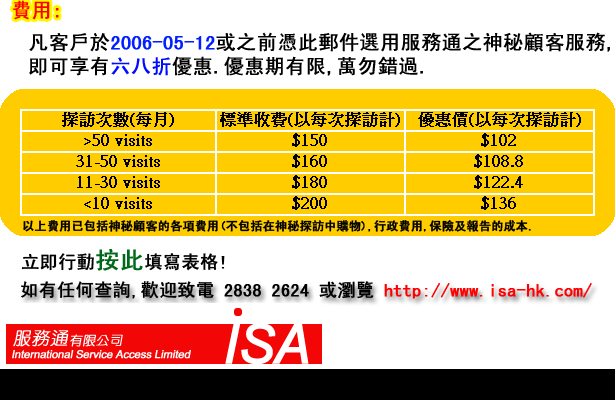
<style>
.page{position:relative;width:615px;height:400px;background:#ffffff}
.page>*{position:absolute;margin:0}
.t1{font:20px "SimHei";color:#ff0000;font-weight:bold}
.t2{font:20px "SimHei";color:#000000;font-weight:bold}
.t3{font:20px "SimHei";color:#001eff;font-weight:bold}
.t4{font:20px "SimHei";color:#000cff;font-weight:bold}
.t5{font:12px "SimHei";color:#000000;font-weight:bold}
.t6{font:18px "SimHei";color:#000000;font-weight:bold}
.t7{font:24px "SimHei";color:#006919;font-weight:bold}
.t8{font:18px "SimHei";color:#ff0000;font-weight:bold}
</style>
<div class="page">
<p class="t1" style="left:12px;top:0px;width:47px;height:20px">費用:</p>
<p class="t2" style="left:29px;top:32px;width:581px;height:44px">凡客戶於<span class="t3">2006-05-12</span>或之前憑此郵件選用服務通之神秘顧客服務,<br>即可享有<span class="t4">六八折</span>優惠.優惠期有限,萬勿錯過.</p>
<p class="t5" style="left:23px;top:220px;width:508px;height:12px">以上費用已包括神秘顧客的各項費用(不包括在神秘探訪中購物),行政費用,保險及報告的成本.</p>
<p class="t6" style="left:21px;top:249px;width:204px;height:22px">立即行動<span class="t7">按此</span>填寫表格!</p>
<p class="t6" style="left:21px;top:281px;width:571px;height:18px">如有任何查詢,歡迎致電 2838 2624 或瀏覽 <span class="t8">http://www.isa-hk.com/</span></p>
</div>
